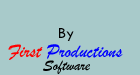
<style>
.page{position:relative;width:140px;height:75px;background:#a8caca}
.page>*{position:absolute;margin:0}
.t1{font:15.9px "TwCenMT-Medium";color:#000000}
.t2{font:19.9px "BrushScriptMT";color:#0000ff}
.t3{font:19.9px "BrushScriptMT";color:#ff0000}
.t4{font:15.9px "BrushScriptMT";color:#000000}
</style>
<div class="page">
<p class="t1" style="left:59px;top:28px;width:15px;height:13px">By</p>
<p class="t2" style="left:8px;top:44px;width:115px;height:16px"><span class="t3">First </span>Productions</p>
<p class="t4" style="left:43px;top:60px;width:47px;height:14px">Software</p>
</div>
